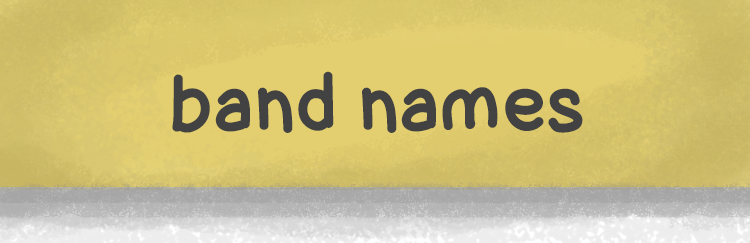
<style>
.page{position:relative;width:750px;height:243px}
.page>*{position:absolute;margin:0}
.t1{font:70px "Lettregaelle";color:#424242}
</style>
<div class="page">
<p class="t1" style="left:172px;top:71px;width:411px;height:62px">band names</p>
</div>
